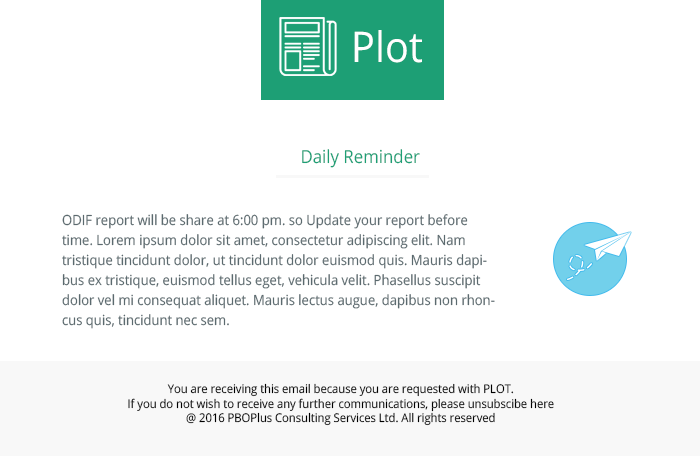
<style>
.page{position:relative;width:700px;height:456px;background:#ffffff}
.page>*{position:absolute;margin:0}
.t1{font:42.3px "OpenSans";color:#ffffff;scale:0.93 1}
.t2{font:18px "OpenSans";color:#1d9f75;scale:0.93 1}
.t3{font:14px/20px "OpenSans";color:#5b6a6f;scale:0.93 1}
.t4{font:12px "OpenSans";color:#000000;scale:0.93 1}
</style>
<div class="page">
<p class="t1" style="left:354px;top:30px;width:68px;height:33px">Plot</p>
<p class="t2" style="left:302px;top:149px;width:118px;height:19px">Daily Reminder</p>
<p class="t3" style="left:62px;top:214px;width:433px;height:115px">ODIF report will be share at 6:00 pm. so Update your report before time. Lorem ipsum dolor sit amet, consectetur adipiscing elit. Nam tristique tincidunt dolor, ut tincidunt dolor euismod quis. Mauris dapibus ex tristique, euismod tellus eget, vehicula velit. Phasellus suscipit dolor vel mi consequat aliquet. Mauris lectus augue, dapibus non rhoncus quis, tincidunt nec sem.</p>
<p class="t4" style="left:128px;top:383px;width:426px;height:43px;text-align:center">You are receiving this email because you are requested with PLOT. <br>If you do not wish to receive any further communications, please unsubscibe here <br>@ 2016 PBOPlus Consulting Services Ltd. All rights reserved</p>
</div>
